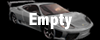
<style>
.page{position:relative;width:100px;height:40px;background:#000000}
.page>*{position:absolute;margin:0}
.t1{font:18px "AbadiMT-CondensedExtraBold";color:#ffffff}
</style>
<div class="page">
<p class="t1" style="left:29px;top:12px;width:43px;height:18px">Empty</p>
</div>
